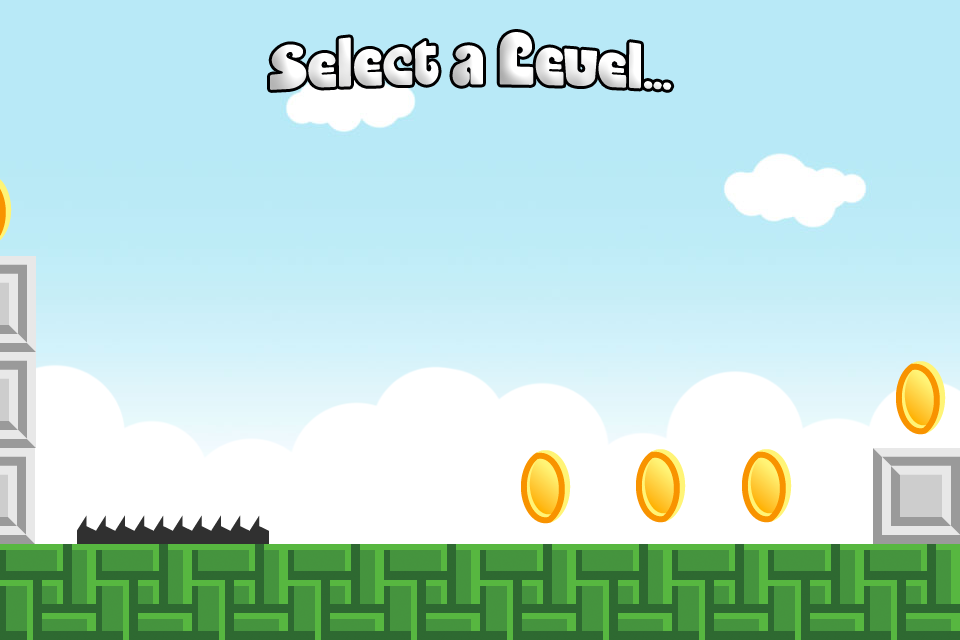
<style>
.page{position:relative;width:960px;height:640px;background:#b8e9f7}
.page>*{position:absolute;margin:0}
.t1{font:50.4px "Enliven";color:#ffffff;scale:1.11 1}
</style>
<div class="page">
<p class="t1" style="left:270px;top:32px;width:402px;height:58px">Select a Level...</p>
</div>
